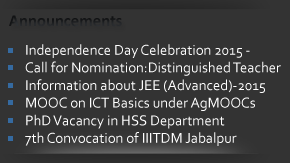
<style>
.page{position:relative;width:290px;height:163px;background:#333333}
.page>*{position:absolute;margin:0}
.t1{font:16.7px "Calibri-Bold";color:#1f2123}
.t2{font:14.7px "Corbel";color:#fefefe}
</style>
<div class="page">
<p class="t1" style="left:9px;top:15px;width:113px;height:12px">Announcements</p>
<p class="t2" style="left:25px;top:44px;width:256px;height:102px">Independence Day Celebration 2015 - <br>Call for Nomination:Distinguished Teacher<br>Information about JEE (Advanced)-2015<br>MOOC on ICT Basics under AgMOOCs<br>PhD Vacancy in HSS Department<br>7th Convocation of IIITDM Jabalpur</p>
</div>
